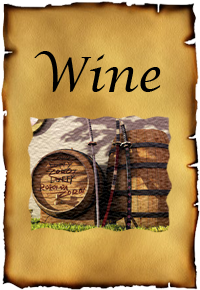
<style>
.page{position:relative;width:200px;height:290px}
.page>*{position:absolute;margin:0}
.t1{font:48px "LucidaCalligraphy-Italic";color:#000000;scale:0.97 1}
</style>
<div class="page">
<p class="t1" style="left:34px;top:51px;width:127px;height:41px">Wine</p>
</div>
